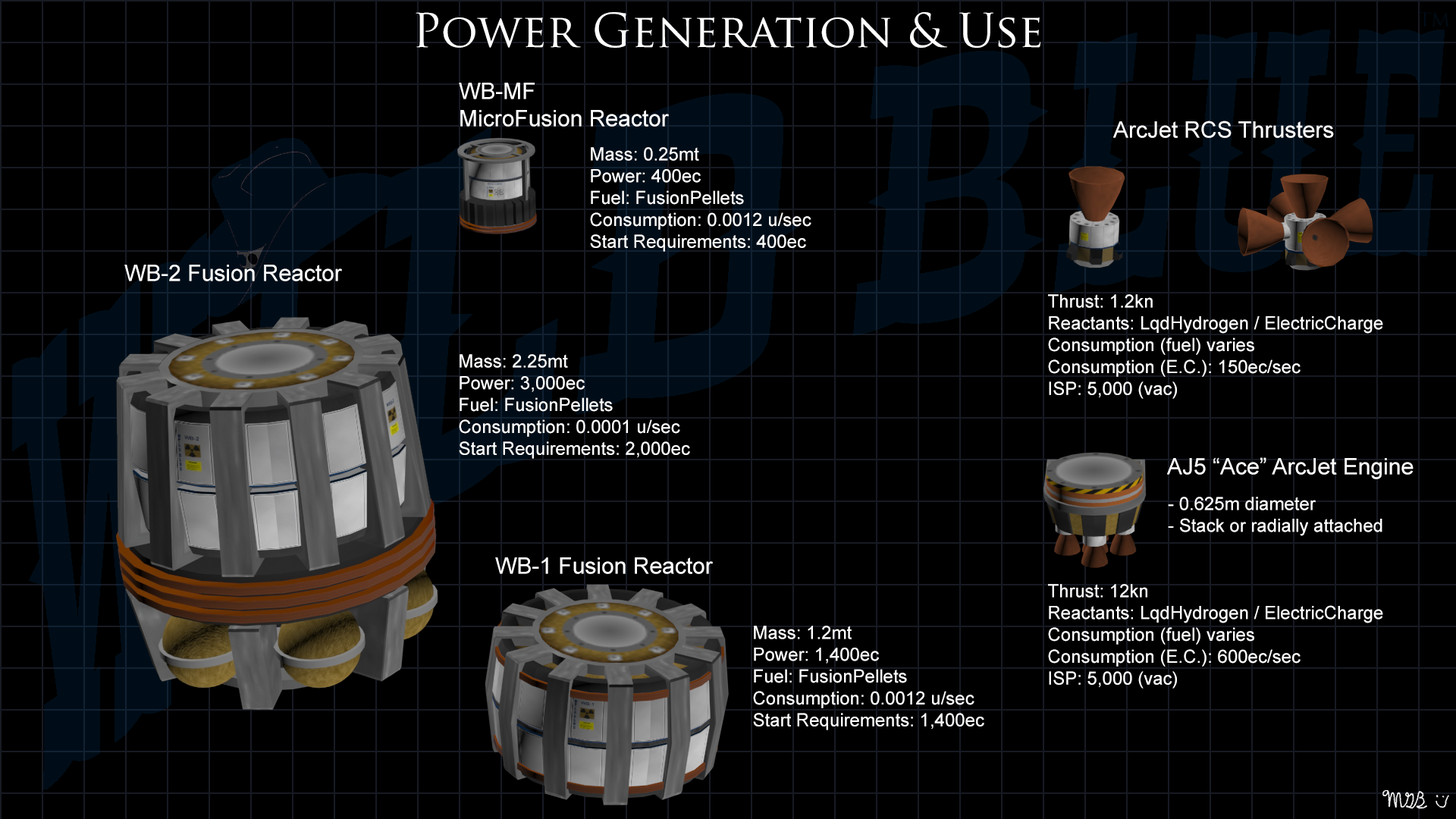
<style>
.page{position:relative;width:1456px;height:819px;background:#000000}
.page>*{position:absolute;margin:0}
.t1{font:45.5px "TrajanPro-Regular";color:#ffffff}
.t2{font:22.7px "ArialMT";color:#ffffff}
.t3{font:18.2px "ArialMT";color:#ffffff}
</style>
<div class="page">
<p class="t1" style="left:416px;top:12px;width:624px;height:36px">Power Generation &amp; Use</p>
<p class="t2" style="left:459px;top:83px;width:210px;height:44px">WB-MF <br>MicroFusion Reactor</p>
<p class="t2" style="left:1113px;top:121px;width:221px;height:17px">ArcJet RCS Thrusters</p>
<p class="t3" style="left:590px;top:147px;width:221px;height:105px">Mass: 0.25mt<br>Power: 400ec<br>Fuel: FusionPellets<br>Consumption: 0.0012 u/sec<br>Start Requirements: 400ec</p>
<p class="t2" style="left:124px;top:265px;width:218px;height:16px">WB-2 Fusion Reactor</p>
<p class="t3" style="left:1048px;top:294px;width:335px;height:105px">Thrust: 1.2kn<br>Reactants: LqdHydrogen / ElectricCharge<br>Consumption (fuel) varies<br>Consumption (E.C.): 150ec/sec<br>ISP: 5,000 (vac)</p>
<p class="t3" style="left:459px;top:354px;width:231px;height:105px">Mass: 2.25mt<br>Power: 3,000ec<br>Fuel: FusionPellets<br>Consumption: 0.0001 u/sec<br>Start Requirements: 2,000ec</p>
<p class="t2" style="left:1167px;top:457px;width:247px;height:22px">AJ5 “Ace” ArcJet Engine</p>
<p class="t3" style="left:1168px;top:497px;width:214px;height:39px">- 0.625m diameter<br>- Stack or radially attached</p>
<p class="t2" style="left:495px;top:557px;width:218px;height:17px">WB-1 Fusion Reactor</p>
<p class="t3" style="left:1048px;top:584px;width:335px;height:105px">Thrust: 12kn<br>Reactants: LqdHydrogen / ElectricCharge<br>Consumption (fuel) varies<br>Consumption (E.C.): 600ec/sec<br>ISP: 5,000 (vac)</p>
<p class="t3" style="left:753px;top:626px;width:231px;height:104px">Mass: 1.2mt<br>Power: 1,400ec<br>Fuel: FusionPellets<br>Consumption: 0.0012 u/sec<br>Start Requirements: 1,400ec</p>
</div>
